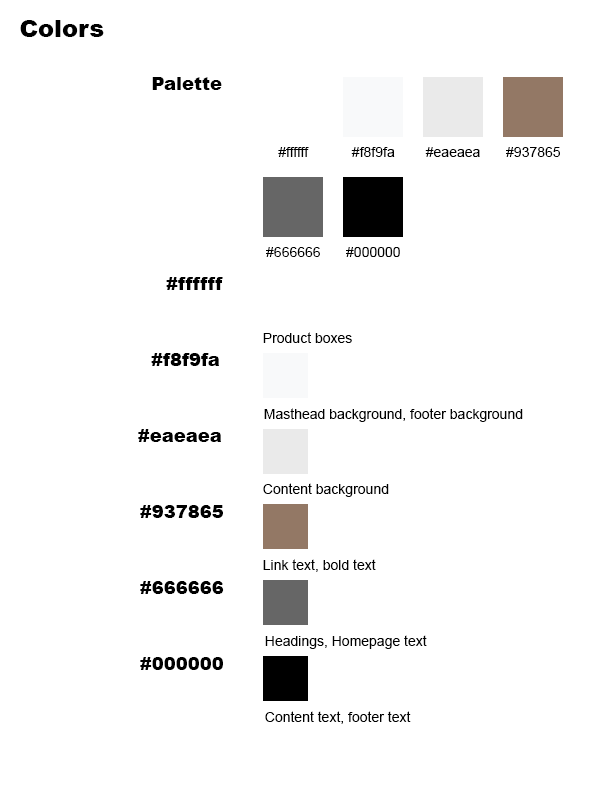
<style>
.page{position:relative;width:612px;height:792px;background:#ffffff}
.page>*{position:absolute;margin:0}
.t1{font:24px "Arial-Black";color:#000000}
.t2{font:18px "Arial-Black";color:#000000}
.t3{font:14px "ArialMT";color:#000000}
</style>
<div class="page">
<p class="t1" style="left:20px;top:20px;width:84px;height:17px">Colors</p>
<p class="t2" style="left:152px;top:77px;width:70px;height:13px">Palette</p>
<p class="t3" style="left:278px;top:147px;width:31px;height:10px">#ffffff</p>
<p class="t3" style="left:351px;top:147px;width:44px;height:10px">#f8f9fa</p>
<p class="t3" style="left:425px;top:147px;width:55px;height:10px">#eaeaea</p>
<p class="t3" style="left:506px;top:147px;width:54px;height:10px">#937865</p>
<p class="t3" style="left:266px;top:247px;width:54px;height:10px">#666666</p>
<p class="t3" style="left:346px;top:247px;width:54px;height:10px">#000000</p>
<p class="t2" style="left:166px;top:277px;width:57px;height:13px">#ffffff</p>
<p class="t3" style="left:263px;top:332px;width:89px;height:11px">Product boxes</p>
<p class="t2" style="left:151px;top:353px;width:68px;height:13px">#f8f9fa</p>
<p class="t3" style="left:264px;top:408px;width:259px;height:14px">Masthead background, footer background</p>
<p class="t2" style="left:138px;top:429px;width:83px;height:13px">#eaeaea</p>
<p class="t3" style="left:263px;top:483px;width:126px;height:14px">Content background</p>
<p class="t2" style="left:140px;top:505px;width:83px;height:13px">#937865</p>
<p class="t3" style="left:263px;top:559px;width:113px;height:13px">Link text, bold text</p>
<p class="t2" style="left:140px;top:581px;width:84px;height:13px">#666666</p>
<p class="t3" style="left:265px;top:635px;width:162px;height:14px">Headings, Homepage text</p>
<p class="t2" style="left:140px;top:657px;width:83px;height:13px">#000000</p>
<p class="t3" style="left:265px;top:711px;width:146px;height:13px">Content text, footer text</p>
</div>
